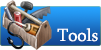
<style>
.page{position:relative;width:101px;height:50px}
.page>*{position:absolute;margin:0}
.t1{font:18px "Sylfaen";color:#ffffff}
</style>
<div class="page">
<p class="t1" style="left:57px;top:28px;width:41px;height:14px">Tools</p>
</div>
